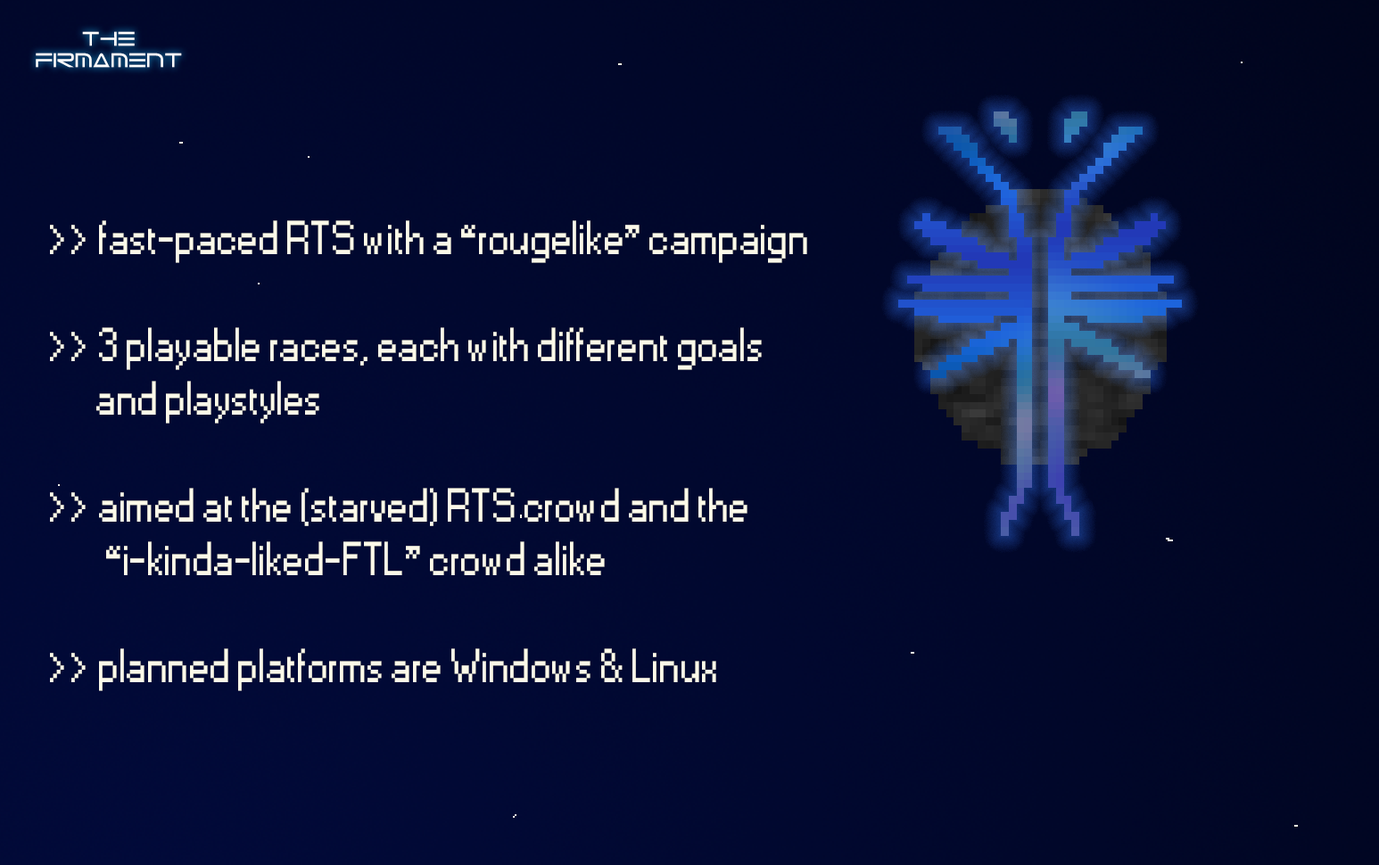
<style>
.page{position:relative;width:1379px;height:865px}
.page>*{position:absolute;margin:0}
.t1{font:44.6px "Small Fonts";color:#fcf9e9}
</style>
<div class="page">
<p class="t1" style="left:50px;top:220px;width:757px;height:471px">&gt;&gt; fast-paced RTS with a “rougelike” campaign<br><br>&gt;&gt; 3 playable races, each with different goals<br>   and playstyles<br><br>&gt;&gt; aimed at the (starved) RTS crowd and the<br>        “i-kinda-liked-FTL” crowd alike<br><br>&gt;&gt; planned platforms are Windows &amp; Linux</p>
</div>
